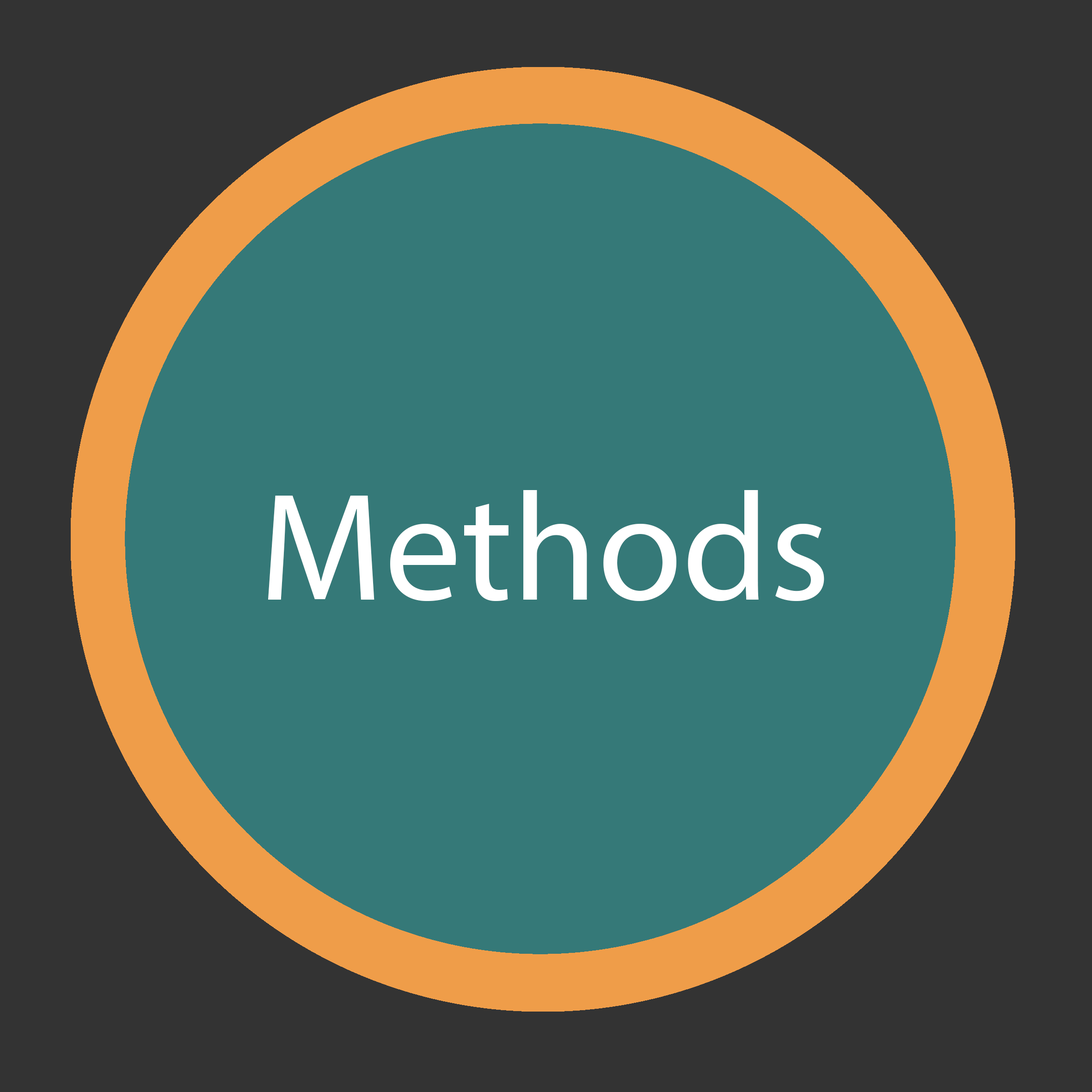
<style>
.page{position:relative;width:1092px;height:1092px;background:#357978}
.page>*{position:absolute;margin:0}
.t1{font:154.1px "MyriadPro-Regular";color:#ffffff}
</style>
<div class="page">
<p class="t1" style="left:268px;top:490px;width:556px;height:111px">Methods</p>
</div>
